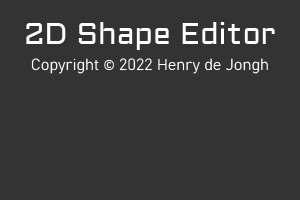
<style>
.page{position:relative;width:300px;height:200px;background:#333333}
.page>*{position:absolute;margin:0}
.t1{font:30px "Aldrich-Regular";color:#ffffff}
.t2{font:16px "Bahnschrift-Light";color:#ffffff}
</style>
<div class="page">
<p class="t1" style="left:26px;top:22px;width:249px;height:28px">2D Shape Editor</p>
<p class="t2" style="left:31px;top:58px;width:68px;height:16px">Copyright</p>
<p class="t2" style="left:104px;top:60px;width:10px;height:10px">©</p>
<p class="t2" style="left:119px;top:58px;width:149px;height:16px">2022 Henry de Jongh</p>
</div>
